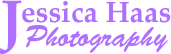
<style>
.page{position:relative;width:171px;height:54px;background:#ffffff}
.page>*{position:absolute;margin:0}
.t1{font:58.4px "PalatinoLinotype-Bold";color:#af70ff}
.t2{font:29.2px "PalatinoLinotype-Bold";color:#af70ff}
.t3{font:29.2px "BrushScriptStd";color:#af70ff}
</style>
<div class="page">
<p class="t1" style="left:0px;top:0px;width:22px;height:54px">J</p>
<p class="t2" style="left:22px;top:1px;width:149px;height:22px">essica Haas</p>
<p class="t3" style="left:26px;top:25px;width:142px;height:28px">Photography</p>
</div>
